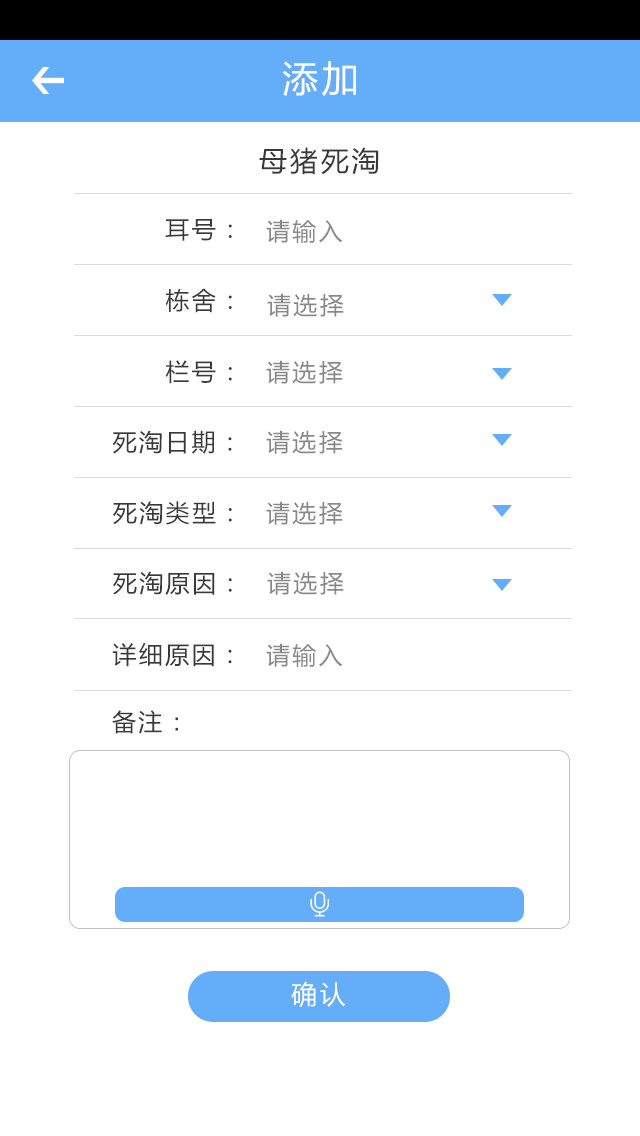
<style>
.page{position:relative;width:640px;height:1136px;background:#ffffff}
.page>*{position:absolute;margin:0}
.t1{font:36px "MicrosoftYaHei";letter-spacing:0.1em;color:#ffffff}
.t2{font:28px "MicrosoftYaHei";letter-spacing:0.1em;color:#3a3939}
.t3{font:24px "MicrosoftYaHei";letter-spacing:0.1em;color:#3a3939}
.t4{font:24px "MicrosoftYaHei";letter-spacing:0.1em;color:#898888}
.t5{font:26px "MicrosoftYaHei";letter-spacing:0.1em;color:#ffffff}
</style>
<div class="page">
<p class="t1" style="left:282px;top:61px;width:74px;height:35px">添加</p>
<p class="t2" style="left:259px;top:147px;width:120px;height:28px">母猪死淘</p>
<p class="t3" style="left:165px;top:219px;width:67px;height:22px">耳号：</p>
<p class="t4" style="left:266px;top:219px;width:77px;height:24px">请输入</p>
<p class="t3" style="left:165px;top:288px;width:67px;height:25px">栋舍：</p>
<p class="t4" style="left:267px;top:293px;width:77px;height:24px">请选择</p>
<p class="t3" style="left:165px;top:360px;width:67px;height:24px">栏号：</p>
<p class="t4" style="left:266px;top:360px;width:77px;height:24px">请选择</p>
<p class="t3" style="left:112px;top:430px;width:120px;height:24px">死淘日期：</p>
<p class="t4" style="left:266px;top:430px;width:77px;height:24px">请选择</p>
<p class="t3" style="left:113px;top:501px;width:119px;height:24px">死淘类型：</p>
<p class="t4" style="left:266px;top:501px;width:77px;height:24px">请选择</p>
<p class="t3" style="left:113px;top:571px;width:119px;height:24px">死淘原因：</p>
<p class="t4" style="left:267px;top:571px;width:77px;height:24px">请选择</p>
<p class="t3" style="left:112px;top:642px;width:120px;height:25px">详细原因：</p>
<p class="t4" style="left:266px;top:643px;width:77px;height:24px">请输入</p>
<p class="t3" style="left:112px;top:710px;width:67px;height:24px">备注：</p>
<p class="t5" style="left:291px;top:981px;width:55px;height:27px">确认</p>
</div>
